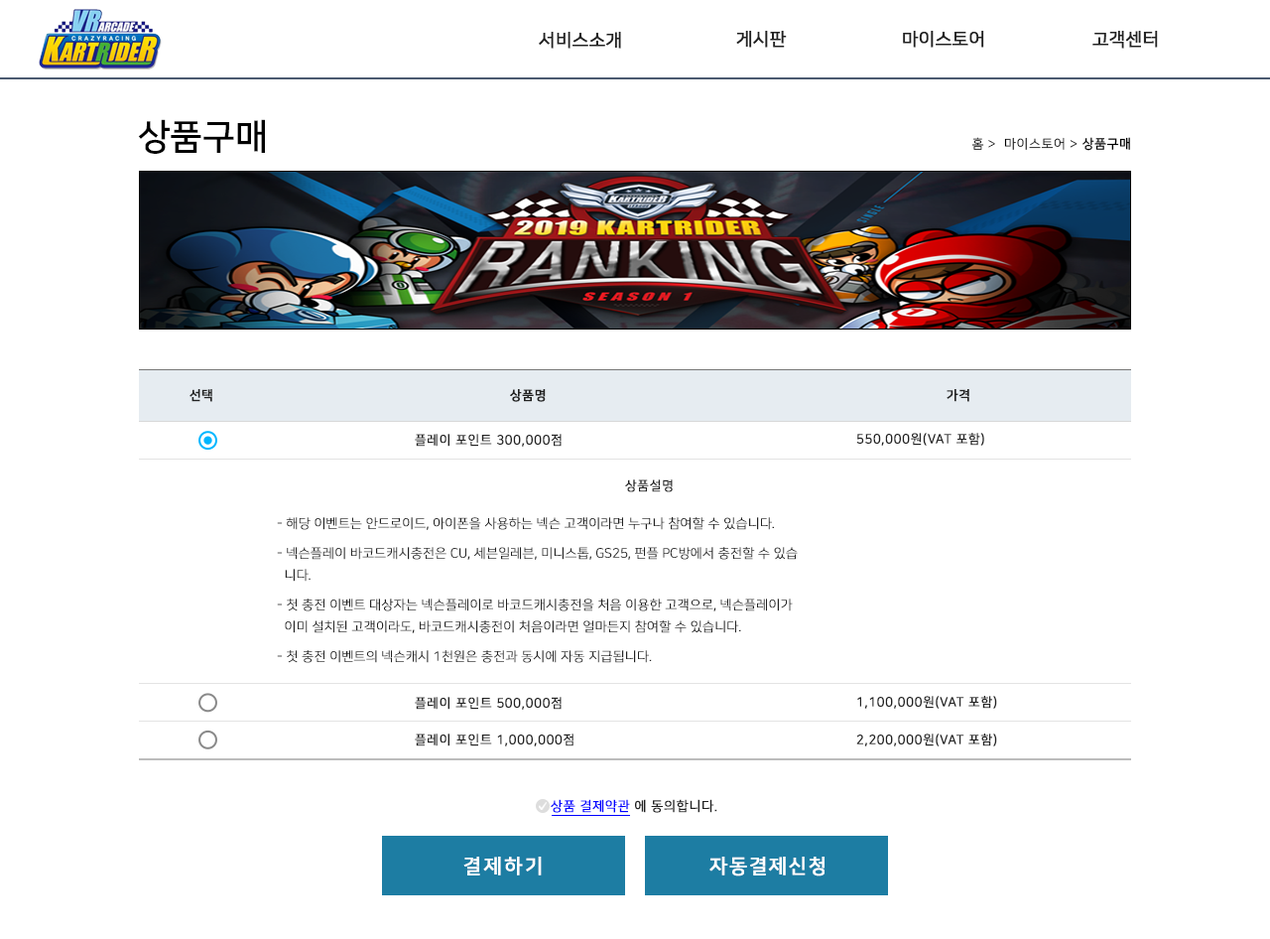
<style>
.page{position:relative;width:1270px;height:939px;background:#ffffff}
.page>*{position:absolute;margin:0}
.t1{font:17.9px "NanumSquareR";color:#222222;font-weight:bold}
.t2{font:35.7px "NanumSquareB";color:#000000}
.t3{font:12.9px "NanumSquareR";letter-spacing:0.05em;color:#000000}
.t4{font:12.9px "NanumSquareL";letter-spacing:0.05em;color:#000000}
.t5{font:12.9px "NanumSquareB";letter-spacing:0.05em;color:#000000}
.t6{font:12.9px "NanumSquareB";letter-spacing:0.04em;color:#222222;text-transform:uppercase;font-weight:bold}
.t7{font:12.9px "NanumSquareR";letter-spacing:0.04em;color:#222222;text-transform:uppercase;font-weight:bold}
.t8{font:12.9px/29.8px "NanumSquareL";color:#222222;text-transform:uppercase;font-weight:bold}
.t9{font:12.9px/21.8px "NanumSquareL";color:#222222;text-transform:uppercase;font-weight:bold}
.t10{font:13.2px "NanumSquareR";letter-spacing:0.04em;color:#222222;text-transform:uppercase;font-weight:bold}
.t11{font:13.2px "NanumSquareR";letter-spacing:0.04em;color:#0000ff;text-transform:uppercase;font-weight:bold}
.t12{font:19.8px "NanumSquareB";letter-spacing:0.1em;color:#ffffff;font-weight:bold}
.t13{font:19.8px "NanumSquareB";letter-spacing:0.06em;color:#ffffff;font-weight:bold}
</style>
<div class="page">
<p class="t1" style="left:736px;top:30px;width:51px;height:18px">게시판</p>
<p class="t1" style="left:903px;top:30px;width:81px;height:18px">마이스토어</p>
<p class="t1" style="left:1093px;top:30px;width:65px;height:18px">고객센터</p>
<p class="t1" style="left:539px;top:31px;width:82px;height:18px">서비스소개</p>
<p class="t2" style="left:138px;top:119px;width:127px;height:35px">상품구매</p>
<p class="t3" style="left:972px;top:137px;width:158px;height:14px">홈 <span class="t4">&gt; </span> 마이스토어 &gt; <span class="t5">상품구매</span></p>
<p class="t6" style="left:190px;top:389px;width:22px;height:13px">선택</p>
<p class="t6" style="left:510px;top:389px;width:36px;height:13px">상품명</p>
<p class="t6" style="left:947px;top:389px;width:23px;height:13px">가격</p>
<p class="t7" style="left:415px;top:434px;width:147px;height:13px">플레이 포인트 300,000점</p>
<p class="t7" style="left:856px;top:433px;width:128px;height:13px">550,000원(VAT 포함)</p>
<p class="t7" style="left:625px;top:479px;width:48px;height:13px">상품설명</p>
<p class="t8" style="left:277px;top:517px;width:521px;height:146px"><span class="t9">- 해당 이벤트는 안드로이드, 아이폰을 사용하는 넥슨 고객이라면 누구나 참여할 수 있습니다.<br></span>- 넥슨플레이 바코드캐시충전은 CU, 세븐일레븐, 미니스톱, GS25, 펀플 PC방에서 충전할 수 있습<br><span class="t9">  니다.<br></span>- 첫 충전 이벤트 대상자는 넥슨플레이로 바코드캐시충전을 처음 이용한 고객으로, 넥슨플레이가<br><span class="t9">  이미 설치된 고객이라도, 바코드캐시충전이 처음이라면 얼마든지 참여할 수 있습니다.<br></span>- 첫 충전 이벤트의 넥슨캐시 1천원은 충전과 동시에 자동 지급됩니다.</p>
<p class="t7" style="left:415px;top:697px;width:147px;height:13px">플레이 포인트 500,000점</p>
<p class="t7" style="left:857px;top:696px;width:140px;height:13px">1,100,000원(VAT 포함)</p>
<p class="t7" style="left:415px;top:733px;width:159px;height:13px">플레이 포인트 1,000,000점</p>
<p class="t7" style="left:856px;top:733px;width:141px;height:13px">2,200,000원(VAT 포함)</p>
<p class="t10" style="left:551px;top:799px;width:166px;height:14px"><span class="t11">상품 결제약관</span> 에 동의합니다.</p>
<p class="t12" style="left:463px;top:856px;width:79px;height:19px">결제하기</p>
<p class="t13" style="left:710px;top:856px;width:115px;height:20px">자동결제신청</p>
</div>
